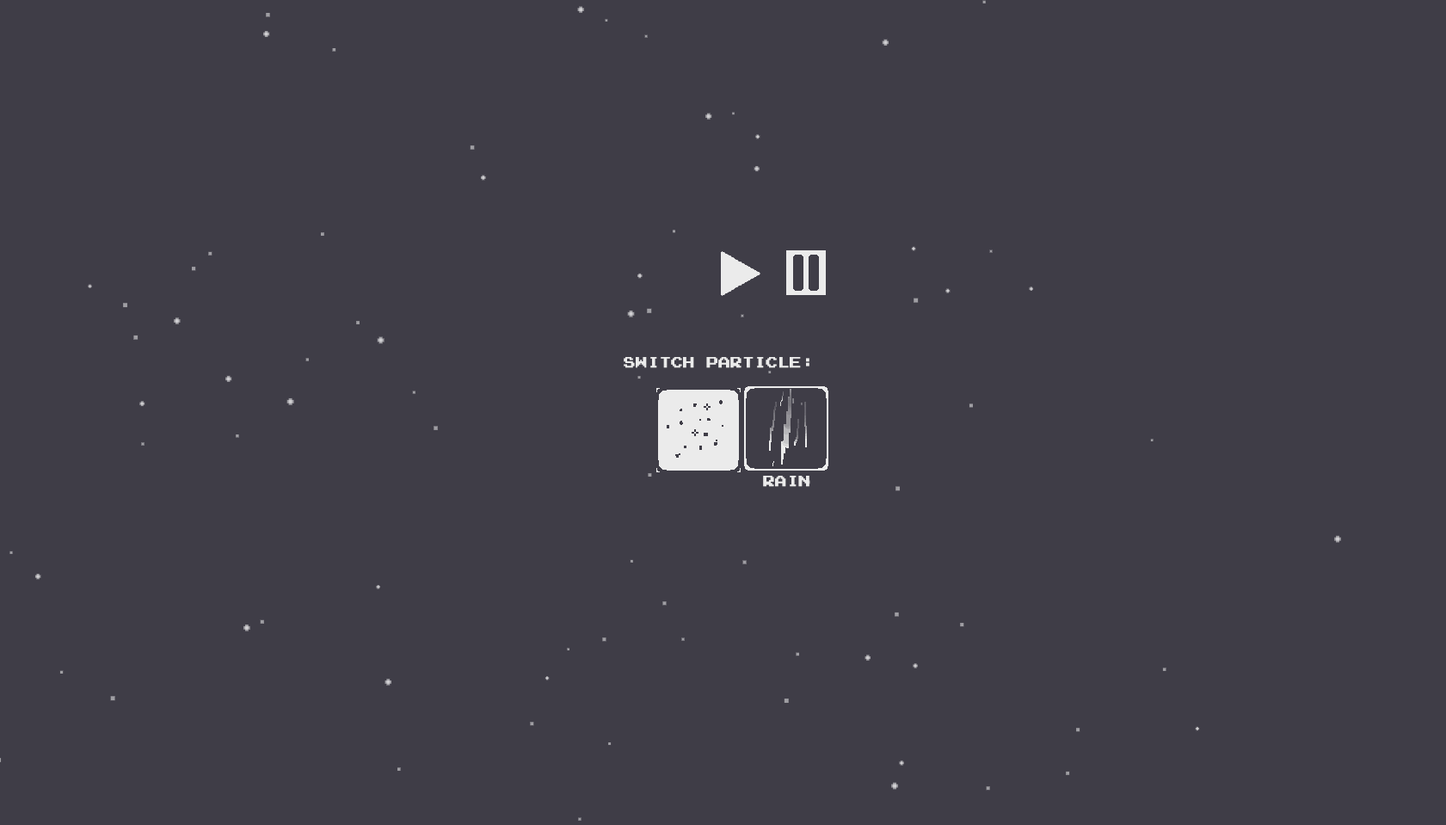
<style>
.page{position:relative;width:1446px;height:825px;background:#3f3d47}
.page>*{position:absolute;margin:0}
.t1{font:11.8px "Bionic-Commando";color:#ebebeb}
</style>
<div class="page">
<p class="t1" style="left:624px;top:357px;width:185px;height:11px">switch particle:</p>
<p class="t1" style="left:763px;top:476px;width:46px;height:11px">Rain</p>
</div>
